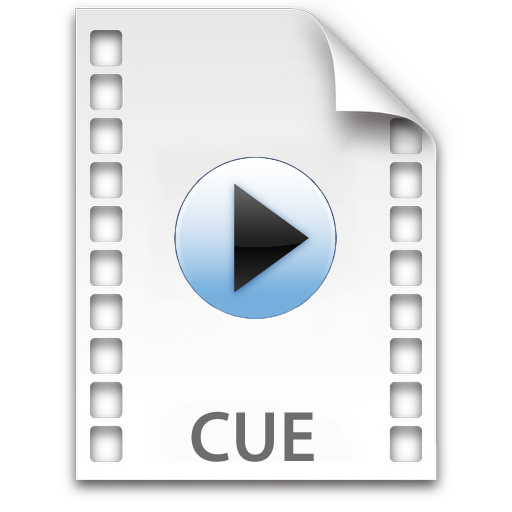
<style>
.page{position:relative;width:512px;height:512px;background:#ffffff}
.page>*{position:absolute;margin:0}
.t1{font:72px "MyriadPro-Semibold";color:#6e6d6d}
</style>
<div class="page">
<p class="t1" style="left:191px;top:411px;width:123px;height:51px">CUE</p>
</div>
